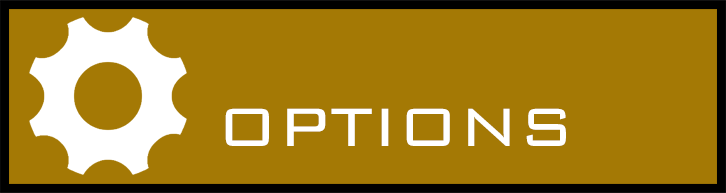
<style>
.page{position:relative;width:726px;height:193px;background:#a47905}
.page>*{position:absolute;margin:0}
.t1{font:71.7px "BankGothic-Light";color:#ffffff}
</style>
<div class="page">
<p class="t1" style="left:225px;top:108px;width:341px;height:38px">OPTIONS</p>
</div>
